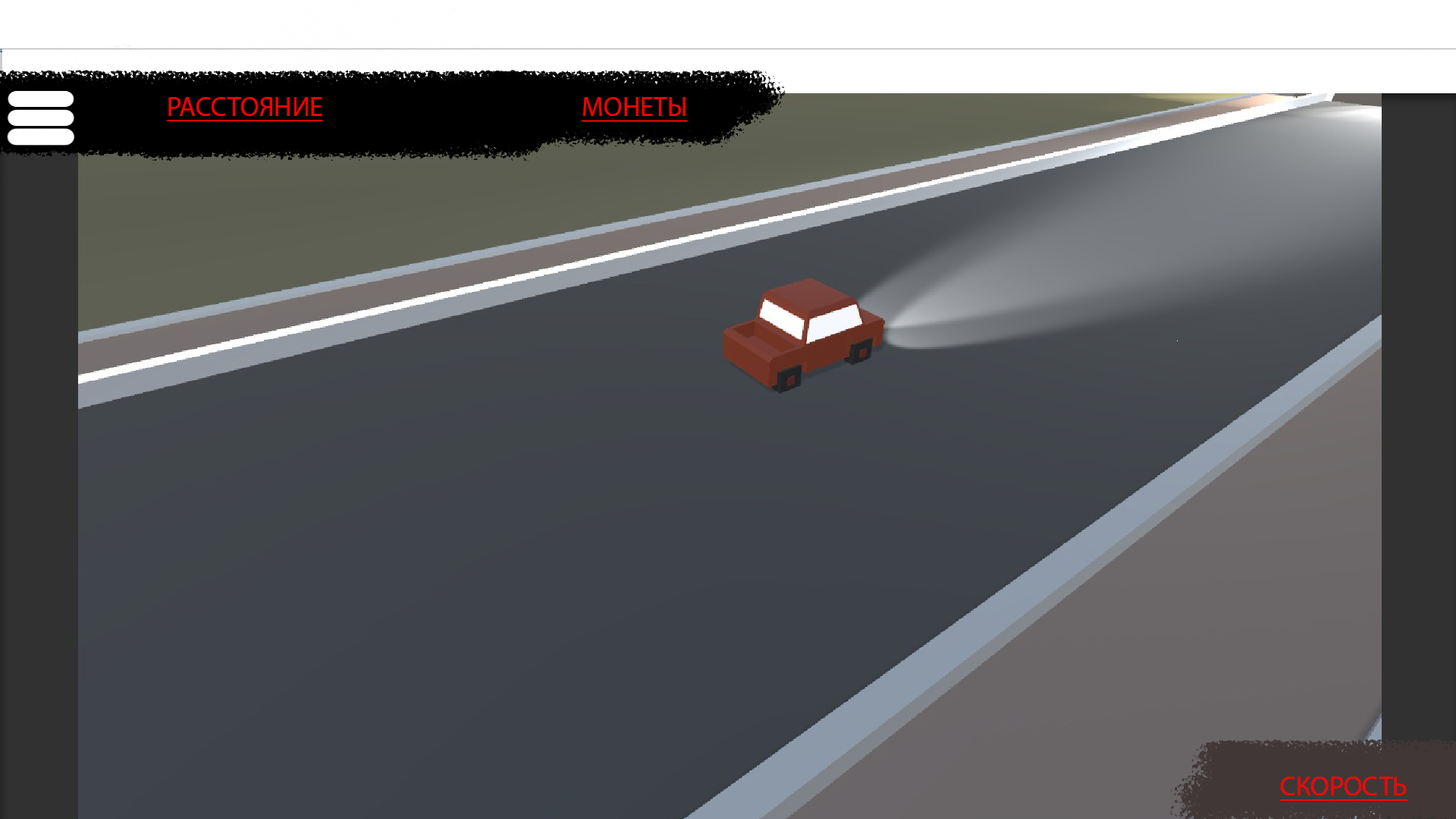
<style>
.page{position:relative;width:1456px;height:819px}
.page>*{position:absolute;margin:0}
.t1{font:27.3px "MyriadPro-Regular";color:#ff0000;text-transform:uppercase;text-decoration:underline}
</style>
<div class="page">
<p class="t1" style="left:167px;top:97px;width:156px;height:24px">Расстояние</p>
<p class="t1" style="left:581px;top:97px;width:107px;height:25px">Монеты</p>
<p class="t1" style="left:1280px;top:777px;width:128px;height:24px">СКОРОСТЬ</p>
</div>
